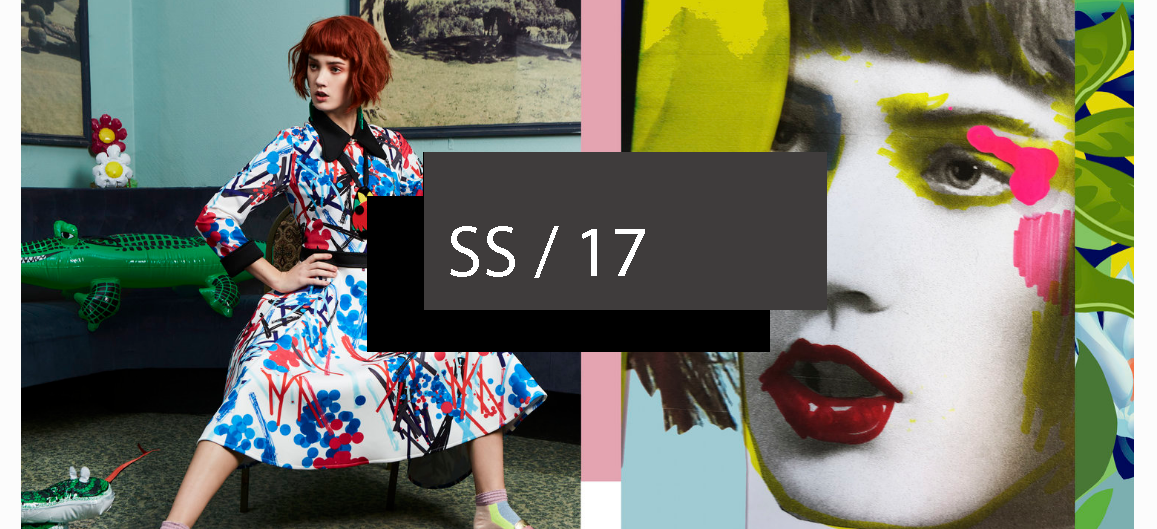
<style>
.page{position:relative;width:1157px;height:529px}
.page>*{position:absolute;margin:0}
.t1{font:72px "MyriadPro-Regular";color:#ffffff}
</style>
<div class="page">
<p class="t1" style="left:450px;top:226px;width:195px;height:52px">SS / 17</p>
</div>
